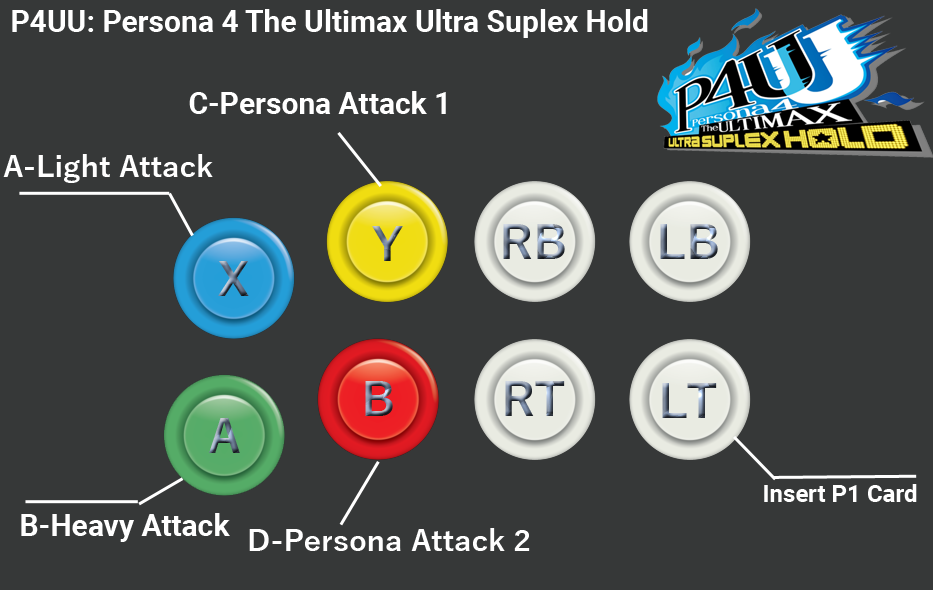
<style>
.page{position:relative;width:933px;height:590px;background:#363838}
.page>*{position:absolute;margin:0}
.t1{font:30px "Roboto-Bold";color:#ffffff}
.t2{font:30px "YuGothic-Bold";color:#ffffff}
.t3{font:24px "Roboto-Bold";color:#ffffff}
</style>
<div class="page">
<p class="t1" style="left:12px;top:9px;width:636px;height:29px">P4UU: Persona 4 The Ultimax Ultra Suplex Hold</p>
<p class="t1" style="left:189px;top:91px;width:257px;height:23px">C-Persona Attack 1</p>
<p class="t2" style="left:3px;top:154px;width:210px;height:29px">A-Light Attack</p>
<p class="t3" style="left:764px;top:484px;width:153px;height:18px">Insert P1 Card</p>
<p class="t1" style="left:21px;top:513px;width:209px;height:29px">B-Heavy Attack</p>
<p class="t2" style="left:249px;top:528px;width:281px;height:23px">D-Persona Attack 2</p>
</div>
